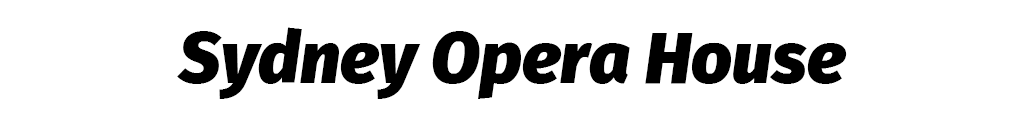
<style>
.page{position:relative;width:1024px;height:128px;background:#ffffff}
.page>*{position:absolute;margin:0}
.t1{font:71.8px "FiraSans-BlackItalic";color:#000000}
</style>
<div class="page">
<p class="t1" style="left:177px;top:27px;width:670px;height:72px">Sydney Opera House</p>
</div>
